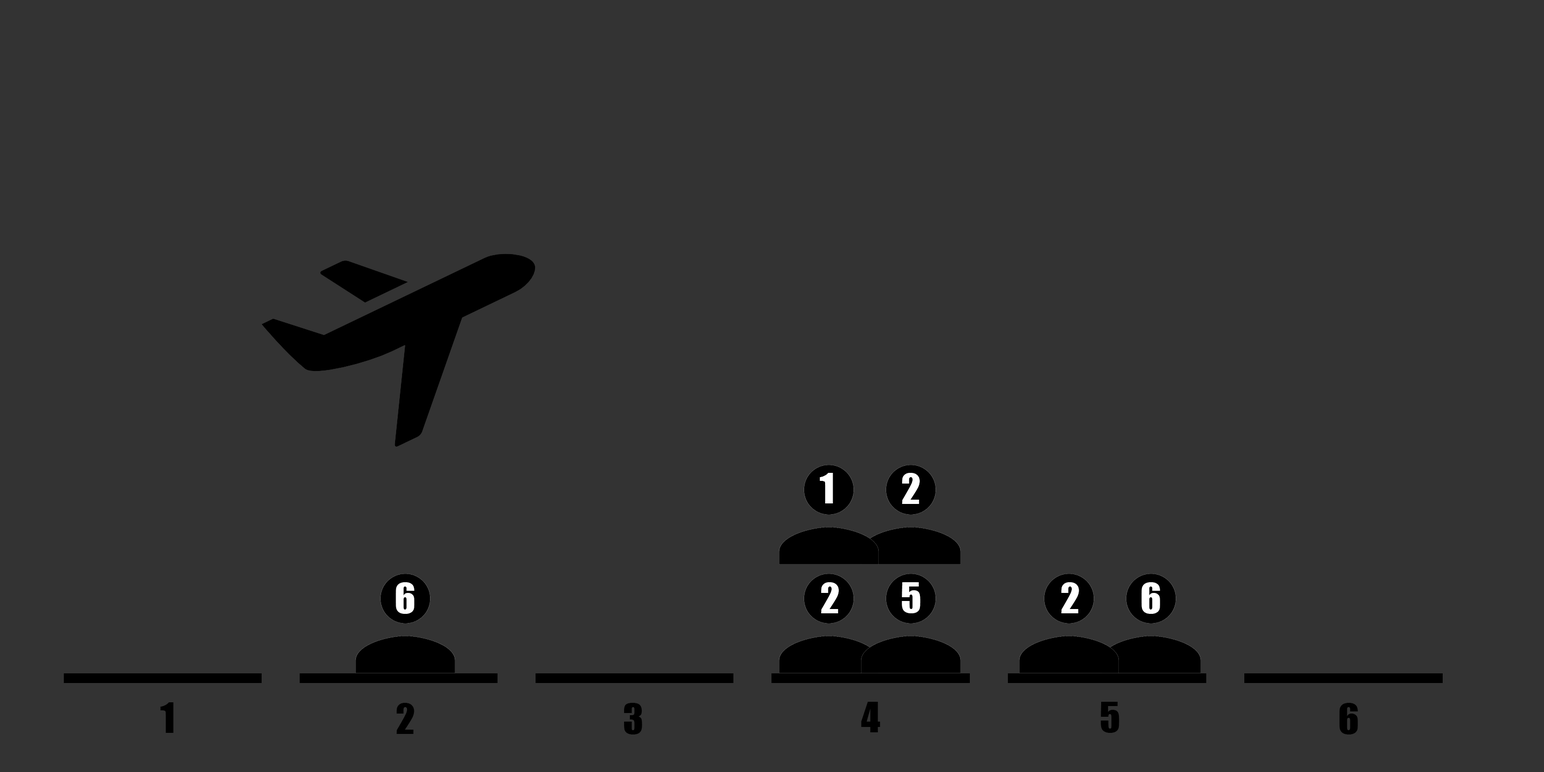
<style>
.page{position:relative;width:1544px;height:772px;background:#333333}
.page>*{position:absolute;margin:0}
.t1{font:38.6px "Impact";color:#ffffff}
.t2{font:38.6px "Impact";color:#000000}
</style>
<div class="page">
<p class="t1" style="left:820px;top:473px;width:13px;height:31px">1</p>
<p class="t1" style="left:902px;top:473px;width:18px;height:31px">2</p>
<p class="t1" style="left:396px;top:582px;width:18px;height:32px">6</p>
<p class="t1" style="left:821px;top:582px;width:18px;height:31px">2</p>
<p class="t1" style="left:902px;top:582px;width:19px;height:31px">5</p>
<p class="t1" style="left:1061px;top:582px;width:18px;height:31px">2</p>
<p class="t1" style="left:1142px;top:582px;width:18px;height:32px">6</p>
<p class="t2" style="left:861px;top:702px;width:19px;height:30px">4</p>
<p class="t2" style="left:1101px;top:702px;width:19px;height:31px">5</p>
<p class="t2" style="left:160px;top:702px;width:14px;height:31px">1</p>
<p class="t2" style="left:396px;top:703px;width:18px;height:31px">2</p>
<p class="t2" style="left:624px;top:703px;width:18px;height:32px">3</p>
<p class="t2" style="left:1339px;top:703px;width:19px;height:32px">6</p>
</div>
